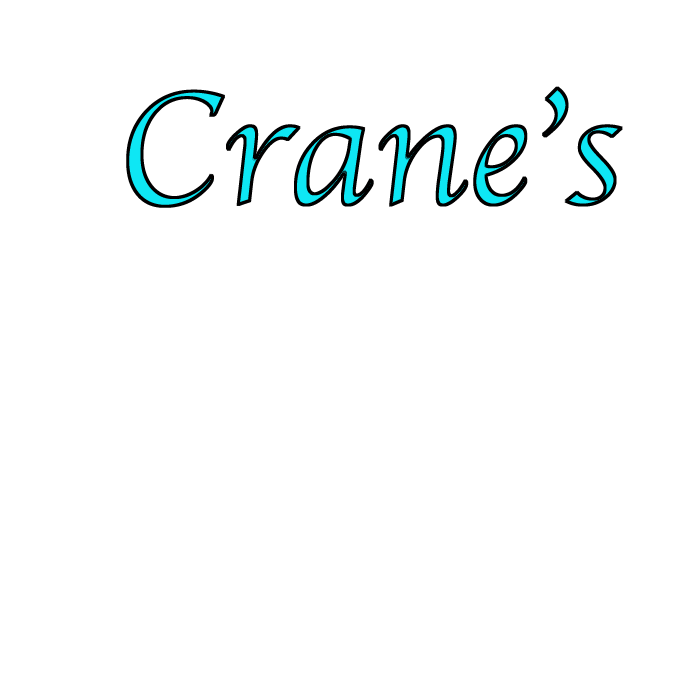
<style>
.page{position:relative;width:700px;height:700px;background:#ffffff}
.page>*{position:absolute;margin:0}
.t1{font:166.7px "Apple-Chancery"}
</style>
<div class="page">
<p class="t1" style="left:127px;top:87px;width:495px;height:120px">Crane’s</p>
</div>
